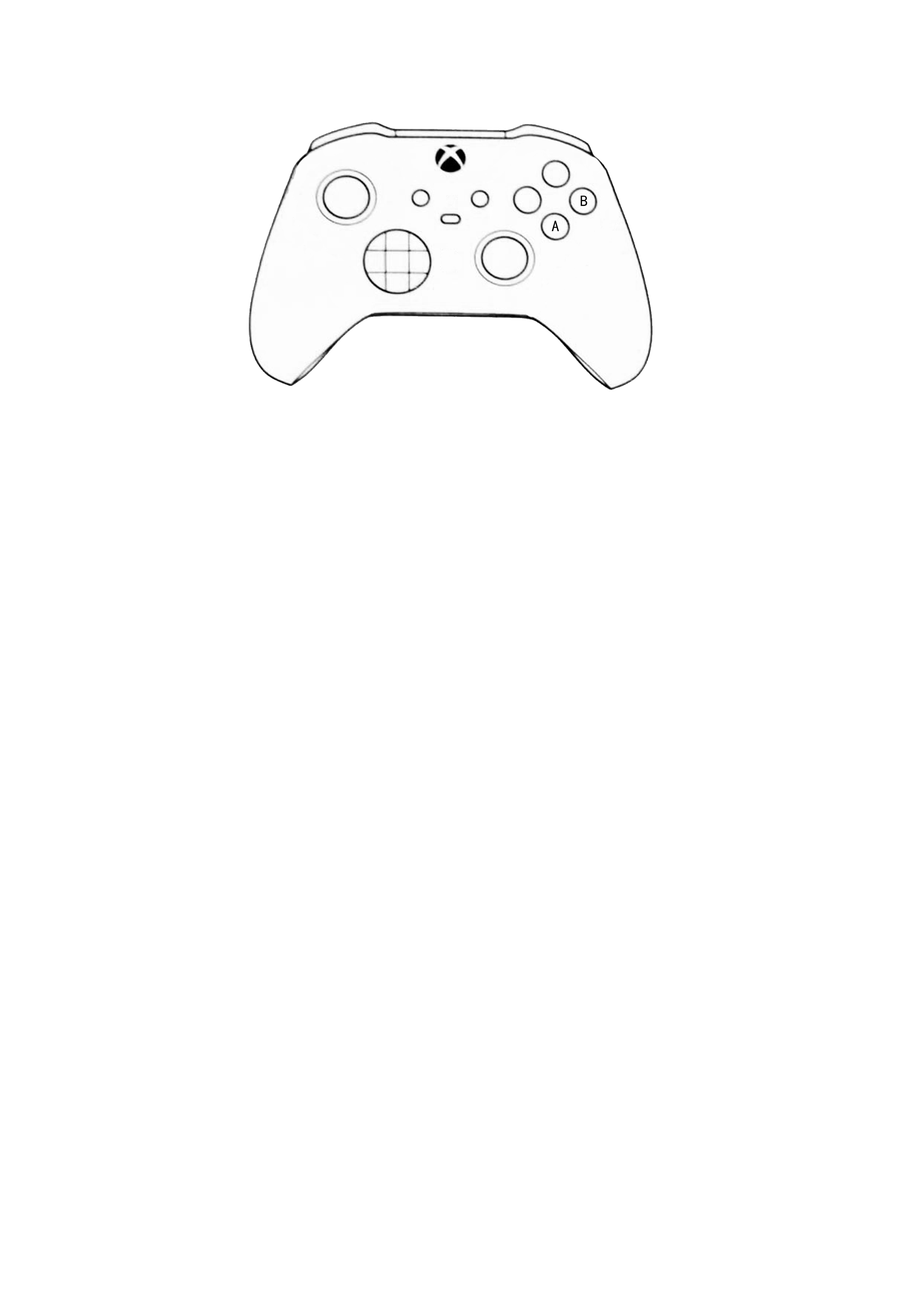
<style>
.page{position:relative;width:918px;height:1299px;background:#ffffff}
.page>*{position:absolute;margin:0}
.t1{font:15.4px "SimHei";color:#000000}
</style>
<div class="page">
<p class="t1" style="left:581px;top:195px;width:7px;height:11px">B</p>
<p class="t1" style="left:552px;top:221px;width:7px;height:10px">A</p>
</div>
